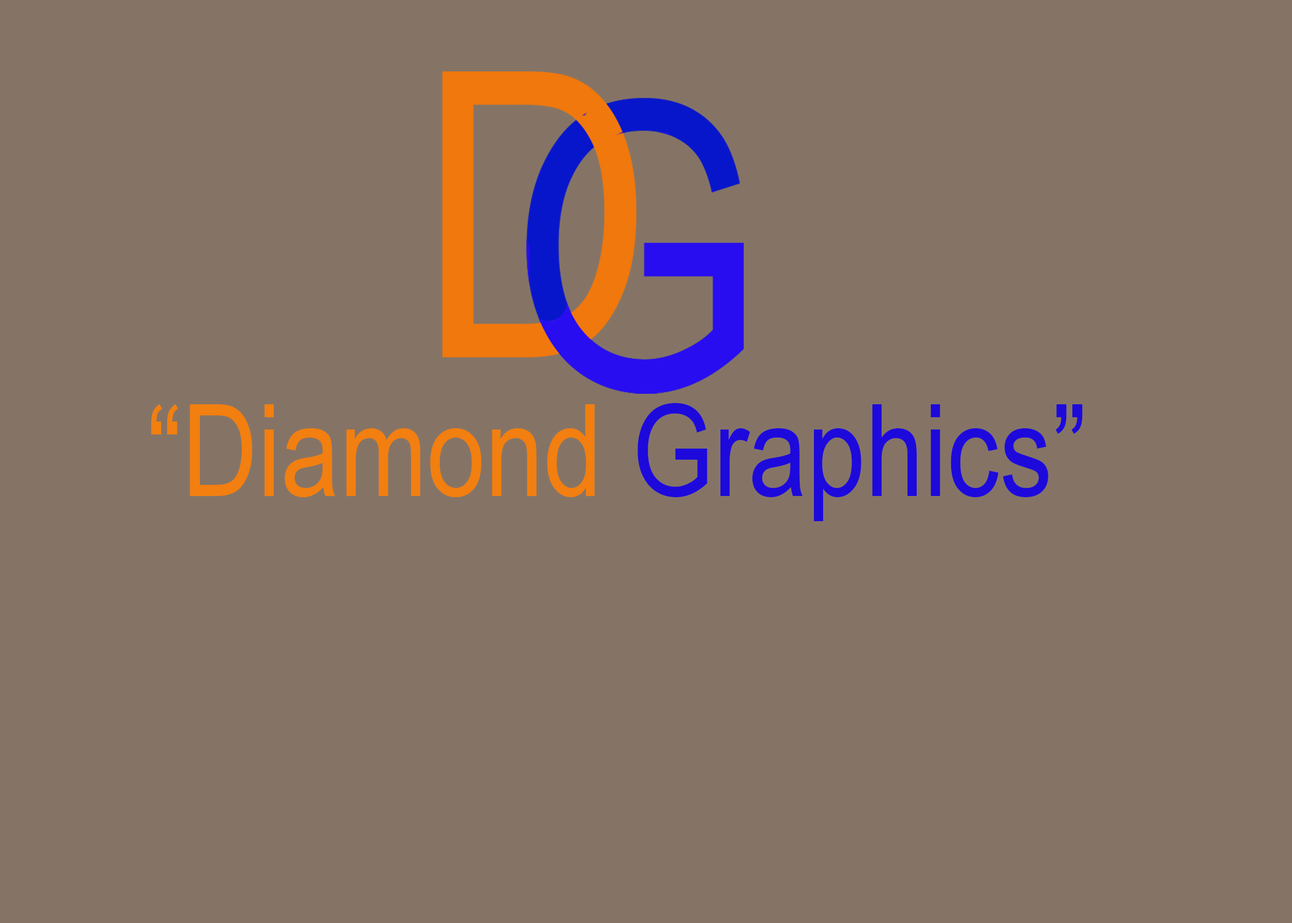
<style>
.page{position:relative;width:1292px;height:923px;background:#857465}
.page>*{position:absolute;margin:0}
.t1{font:128.2px "ArialNarrow";color:#1d09db}
.t2{font:128.2px "ArialNarrow";color:#f27f0f}
</style>
<div class="page">
<p class="t1" style="left:151px;top:403px;width:932px;height:118px"><span class="t2">“Diamond </span>Graphics”</p>
</div>
